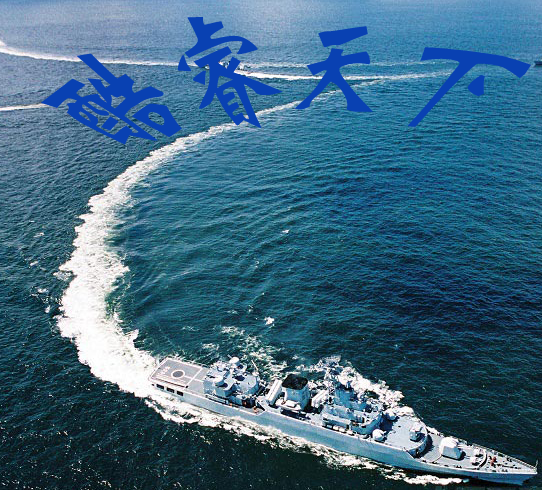
<style>
.page{position:relative;width:542px;height:490px}
.page>*{position:absolute;margin:0}
.t1{font:90px "-G-w-e-i-0-0-h";color:#0941b2}
</style>
<div class="page">
<p class="t1" style="left:41px;top:17px;width:490px;height:128px">酷睿天下</p>
</div>
